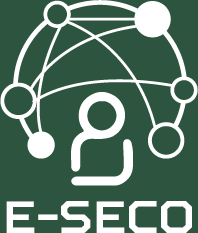
<style>
.page{position:relative;width:198px;height:233px;background:#2d543f}
.page>*{position:absolute;margin:0}
.t1{font:45px "SquaresBold";color:#ffffff}
</style>
<div class="page">
<p class="t1" style="left:6px;top:201px;width:186px;height:32px">E-SECO</p>
</div>
